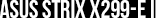
<style>
.page{position:relative;width:158px;height:18px;background:#000000}
.page>*{position:absolute;margin:0}
.t1{font:25px "BebasNeue-Bold";color:#ffffff}
</style>
<div class="page">
<p class="t1" style="left:0px;top:0px;width:159px;height:18px">ASUS STRIX X299-e II</p>
</div>
